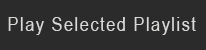
<style>
.page{position:relative;width:206px;height:50px;background:#2b2b2b}
.page>*{position:absolute;margin:0}
.t1{font:20px "ArialNarrow";letter-spacing:0.075em;color:#d9d9d8}
</style>
<div class="page">
<p class="t1" style="left:8px;top:17px;width:188px;height:18px">Play Selected Playlist</p>
</div>
